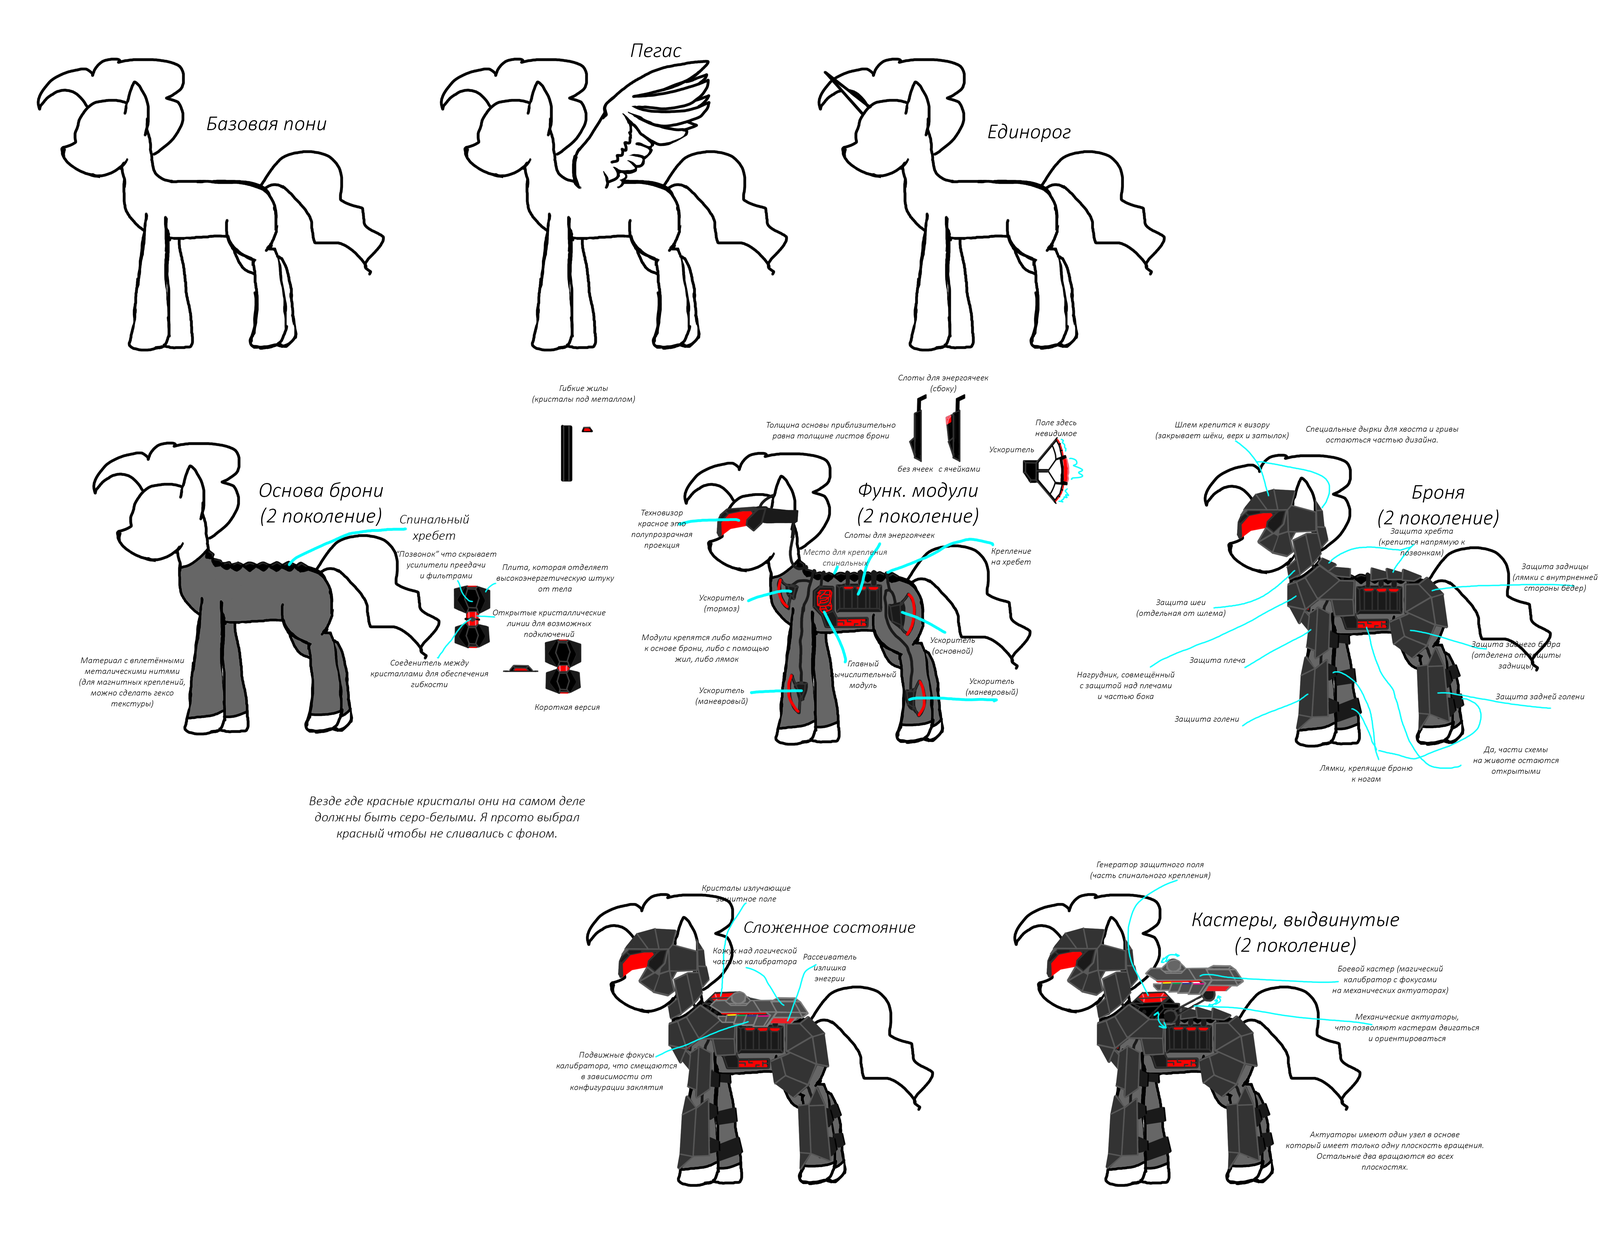
<style>
.page{position:relative;width:1620px;height:1242px;background:#ffffff}
.page>*{position:absolute;margin:0}
.t1{font:21.3px "Calibri-LightItalic";color:#000000}
.t2{font:9px "Calibri-LightItalic";color:#000000}
.t3{font:9px "Calibri-LightItalic";color:#090909}
.t4{font:13.5px "Calibri-LightItalic";color:#000000}
.t5{font:9px "Calibri-LightItalic";color:#333333}
.t6{font:18px "Calibri-LightItalic";color:#000000}
</style>
<div class="page">
<p class="t1" style="left:631px;top:43px;width:50px;height:14px">Пегас</p>
<p class="t1" style="left:207px;top:117px;width:119px;height:13px">Базовая пони</p>
<p class="t1" style="left:988px;top:124px;width:83px;height:18px">Единорог</p>
<p class="t2" style="left:899px;top:374px;width:89px;height:19px;text-align:center">Слоты для энергоячеек<br>(сбоку)</p>
<p class="t2" style="left:532px;top:385px;width:103px;height:18px;text-align:center">Гибкие жилы<br>(кристалы под металлом)</p>
<p class="t2" style="left:767px;top:422px;width:129px;height:18px;text-align:center">Толщина основы приблизительно<br>равна толщине листов брони</p>
<p class="t2" style="left:1035px;top:419px;width:42px;height:17px;text-align:center">Поле здесь<br>невидимое</p>
<p class="t2" style="left:1156px;top:422px;width:133px;height:18px;text-align:center">Шлем крепится к визору<br>(закрывает шёки, верх и затылок)</p>
<p class="t2" style="left:1306px;top:426px;width:152px;height:17px;text-align:center">Специальные дырки для хвоста и гривы<br>остаються частью дизайна.</p>
<p class="t3" style="left:990px;top:447px;width:44px;height:7px">Ускоритель</p>
<p class="t2" style="left:898px;top:466px;width:35px;height:6px">без ячеек</p>
<p class="t2" style="left:939px;top:466px;width:41px;height:6px">с ячейками</p>
<p class="t1" style="left:259px;top:482px;width:124px;height:44px;text-align:center">Основа брони<br>(2 поколение)</p>
<p class="t1" style="left:858px;top:482px;width:120px;height:44px;text-align:center">Функ. модули<br>(2 поколение)</p>
<p class="t1" style="left:1378px;top:485px;width:121px;height:43px;text-align:center">Броня<br>(2 поколение)</p>
<p class="t2" style="left:632px;top:510px;width:60px;height:39px;text-align:center">Техновизор<br>красное это<br>полупрозрачная<br>проекция</p>
<p class="t4" style="left:400px;top:515px;width:69px;height:27px;text-align:center">Спинальный<br>хребет</p>
<p class="t2" style="left:845px;top:532px;width:90px;height:7px">Слоты для энергоячеек</p>
<p class="t2" style="left:1379px;top:528px;width:86px;height:29px;text-align:center">Защита хребта<br>(крепится напрямую к<br>позвонкам)</p>
<p class="t2" style="left:397px;top:551px;width:99px;height:29px;text-align:center">“Позвонок” что скрывает<br>усилители преедачи<br>и фильтрами</p>
<p class="t5" style="left:804px;top:549px;width:83px;height:17px;text-align:center">Место для крепления<br>спинальных</p>
<p class="t2" style="left:991px;top:548px;width:40px;height:18px;text-align:center">Крепление<br>на хребет</p>
<p class="t2" style="left:497px;top:564px;width:117px;height:28px;text-align:center">Плита, которая отделяет<br>высокоэнергетическую штуку<br>от тела</p>
<p class="t2" style="left:1513px;top:563px;width:85px;height:29px;text-align:center">Защита задницы<br>(лямки с внутрненней<br>стороны бёдер)</p>
<p class="t2" style="left:699px;top:595px;width:45px;height:18px;text-align:center">Ускоритель<br>(тормоз)</p>
<p class="t2" style="left:1137px;top:599px;width:89px;height:18px;text-align:center">Защита шеи<br>(отдельная от шлема)</p>
<p class="t2" style="left:493px;top:610px;width:113px;height:27px;text-align:center">Открытые кристаллические<br>линии для возможных<br>подключений</p>
<p class="t2" style="left:642px;top:634px;width:130px;height:29px;text-align:center">Модули крепятся либо магнитно<br>к основе брони, либо с помощью<br>жил, либо лямок</p>
<p class="t2" style="left:930px;top:637px;width:45px;height:18px;text-align:center">Ускоритель<br>(основной)</p>
<p class="t2" style="left:1472px;top:641px;width:89px;height:29px;text-align:center">Защита заднего бедра<br>(отделена от защиты<br>задницы)</p>
<p class="t2" style="left:79px;top:657px;width:106px;height:51px;text-align:center">Материал с вплетёнными<br>металическими нитями<br>(для магнитных креплений,<br>можно сделать гексо<br>текстуры)</p>
<p class="t2" style="left:371px;top:660px;width:117px;height:27px;text-align:center">Соеденитель между<br>кристаллами для обеспечения<br>гибкости</p>
<p class="t2" style="left:830px;top:660px;width:66px;height:30px;text-align:center">Главный<br>вычислительный<br>модуль</p>
<p class="t2" style="left:1190px;top:657px;width:55px;height:7px">Защита плеча</p>
<p class="t2" style="left:1077px;top:671px;width:98px;height:28px;text-align:center">Нагрудник, совмещённый<br>с защитой над плечами<br>и частью бока</p>
<p class="t2" style="left:696px;top:687px;width:52px;height:19px;text-align:center">Ускоритель<br>(маневровый)</p>
<p class="t2" style="left:966px;top:678px;width:52px;height:18px;text-align:center">Ускоритель<br>(маневровый)</p>
<p class="t2" style="left:1496px;top:693px;width:88px;height:8px">Защита задней голени</p>
<p class="t2" style="left:535px;top:704px;width:65px;height:7px">Короткая версия</p>
<p class="t2" style="left:1175px;top:716px;width:64px;height:7px">Защиита голени</p>
<p class="t2" style="left:1473px;top:747px;width:86px;height:28px;text-align:center">Да, части схемы<br>на животе остаются<br>открытыми</p>
<p class="t2" style="left:1319px;top:765px;width:93px;height:17px;text-align:center">Лямки, крепящие броню<br>к ногам</p>
<p class="t4" style="left:309px;top:796px;width:276px;height:44px;text-align:center">Везде где красные кристалы они на самом деле<br>должны быть серо-белыми. Я прсото выбрал<br>красный чтобы не сливались с фоном.</p>
<p class="t2" style="left:1091px;top:862px;width:119px;height:18px;text-align:center">Генератор защитного поля<br>(часть спинального крепления)</p>
<p class="t2" style="left:702px;top:885px;width:89px;height:18px;text-align:center">Кристалы излучающие<br>защитное поле</p>
<p class="t1" style="left:1192px;top:912px;width:207px;height:43px;text-align:center">Кастеры, выдвинутые<br>(2 поколение)</p>
<p class="t6" style="left:744px;top:922px;width:171px;height:11px">Сложенное состояние</p>
<p class="t2" style="left:713px;top:947px;width:84px;height:19px;text-align:center">Кожух над логической<br>частью калибратора</p>
<p class="t2" style="left:803px;top:954px;width:53px;height:29px;text-align:center">Рассеиватель<br>излишка<br>энегрии</p>
<p class="t2" style="left:1332px;top:965px;width:116px;height:30px;text-align:center">Боевой кастер (магический<br>калибратор с фокусами<br>на механических актуаторах)</p>
<p class="t2" style="left:1335px;top:1014px;width:144px;height:29px;text-align:center">Механические актуаторы,<br>что позволяют кастерам двигаться<br>и ориентироваться</p>
<p class="t2" style="left:556px;top:1052px;width:121px;height:40px;text-align:center">Подвижные фокусы<br>калибратора, что смещаются<br>в зависимости от<br>конфигурации заклятия</p>
<p class="t2" style="left:1286px;top:1131px;width:197px;height:39px;text-align:center">Актуаторы имеют один узел в основе<br>который имеет только одну плоскость вращения.<br>Остальные два вращаются во всех<br>плоскостях.</p>
</div>
